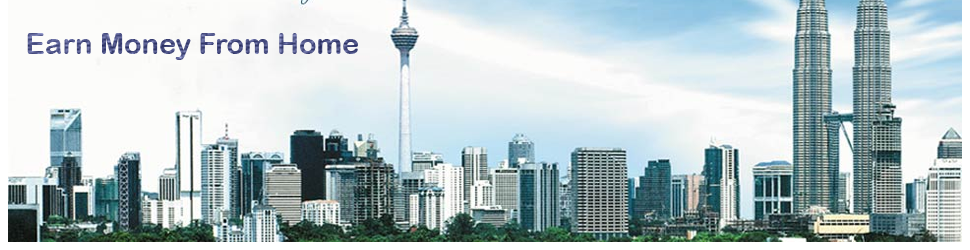
<style>
.page{position:relative;width:970px;height:250px}
.page>*{position:absolute;margin:0}
.t1{font:29px "ArialRoundedMTBold"}
</style>
<div class="page">
<p class="t1" style="left:27px;top:33px;width:331px;height:27px">Earn Money From Home</p>
</div>
